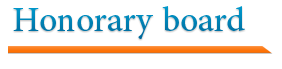
<style>
.page{position:relative;width:282px;height:69px;background:#ffffff}
.page>*{position:absolute;margin:0}
.t1{font:48px "AdobeArabic-Regular";color:#0080b3}
</style>
<div class="page">
<p class="t1" style="left:13px;top:6px;width:232px;height:33px">Honorary board</p>
</div>
